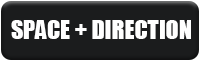
<style>
.page{position:relative;width:200px;height:60px;background:#1b1c1d}
.page>*{position:absolute;margin:0}
.t1{font:24px "Impact";color:#ffffff}
</style>
<div class="page">
<p class="t1" style="left:11px;top:20px;width:180px;height:19px">SPACE + DIRECTION</p>
</div>
